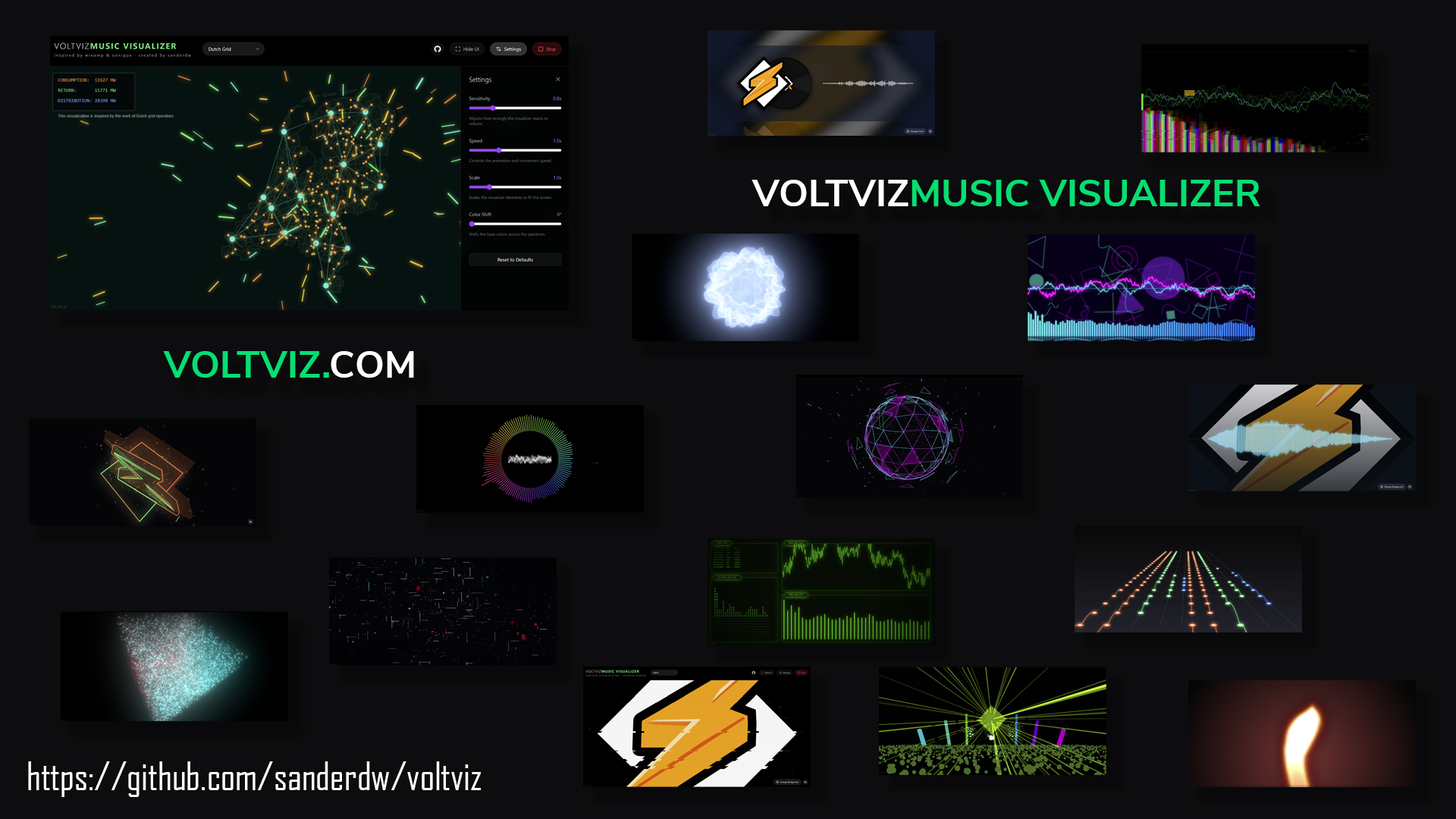
<style>
.page{position:relative;width:1456px;height:819px;background:#0d0d0f}
.page>*{position:absolute;margin:0}
.t1{font:37.9px "NunitoSans-Bold";color:#05df72}
.t2{font:37.9px "NunitoSans-Bold";color:#ffffff}
.t3{font:37.9px "AgencyFB-Reg";color:#ffffff}
</style>
<div class="page">
<p class="t1" style="left:751px;top:180px;width:509px;height:26px"><span class="t2">VOLTVIZ</span>MUSIC VISUALIZER</p>
<p class="t1" style="left:163px;top:351px;width:251px;height:27px">VOLTVIZ.<span class="t2">COM</span></p>
<p class="t3" style="left:28px;top:761px;width:453px;height:36px">https://github.com/sanderdw/voltviz</p>
</div>
